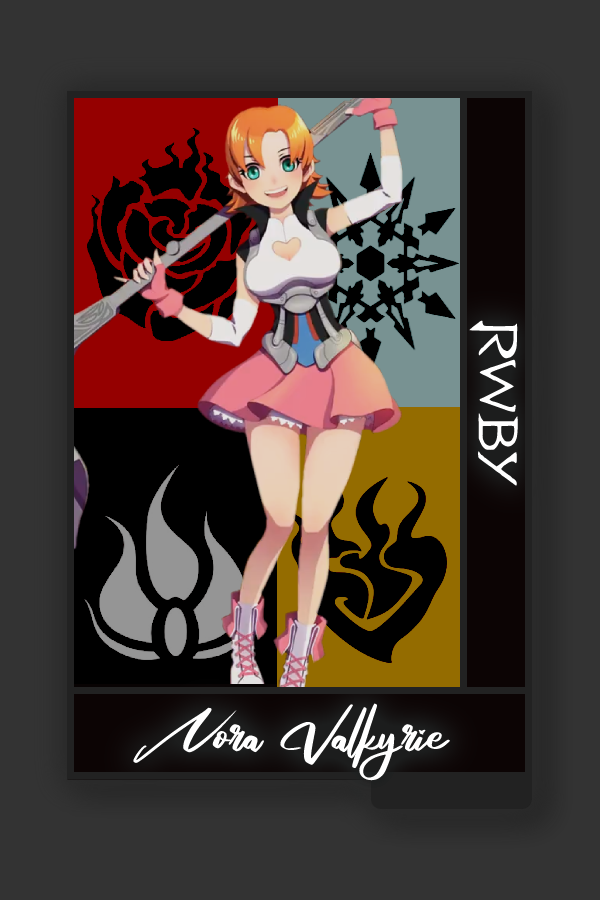
<style>
.page{position:relative;width:600px;height:900px;background:#333333}
.page>*{position:absolute;margin:0}
.t1{font:61.3px "RWBY_Style";color:#ffffff;scale:1.25 1}
.t2{font:76.6px "RosegaFREE";color:#ffffff;scale:0.91 1}
</style>
<div class="page">
<p class="t1" style="left:469px;top:320px;width:49px;height:166px;rotate:90deg">RWBY</p>
<p class="t2" style="left:133px;top:703px;width:318px;height:83px">Nora Valkyrie</p>
</div>
